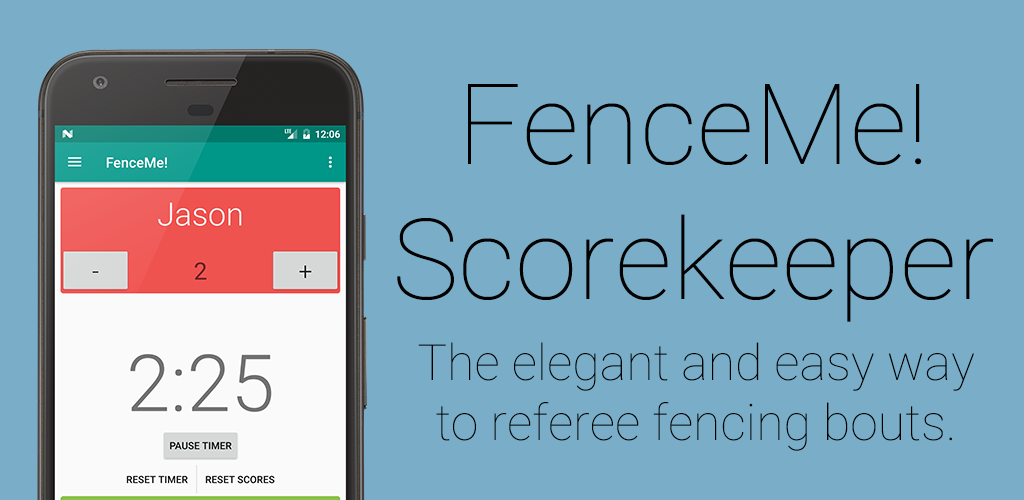
<style>
.page{position:relative;width:1024px;height:500px;background:#7aaec8}
.page>*{position:absolute;margin:0}
.t1{font:112.5px "Roboto-Thin";color:#000000}
.t2{font:50px "Roboto-Thin";color:#000000}
</style>
<div class="page">
<p class="t1" style="left:397px;top:84px;width:597px;height:238px;text-align:center">FenceMe!<br>Scorekeeper</p>
<p class="t2" style="left:418px;top:342px;width:556px;height:109px;text-align:center">The elegant and easy way<br>to referee fencing bouts.</p>
</div>
